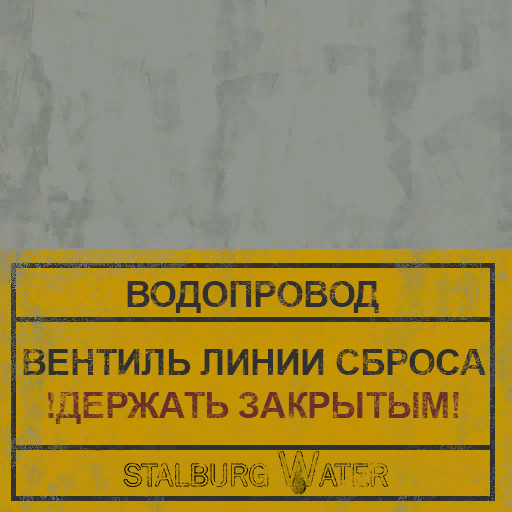
<style>
.page{position:relative;width:512px;height:512px}
.page>*{position:absolute;margin:0}
.t1{font:36px "Arial-BoldMT";letter-spacing:-0.02em;color:#303030}
.t2{font:36px "Arial-BoldMT";letter-spacing:-0.02em;color:#672f2c}
</style>
<div class="page">
<p class="t1" style="left:127px;top:281px;width:252px;height:32px">ВОДОПРОВОД</p>
<p class="t1" style="left:23px;top:349px;width:463px;height:26px">ВЕНТИЛЬ ЛИНИИ СБРОСА</p>
<p class="t2" style="left:48px;top:392px;width:411px;height:32px">!ДЕРЖАТЬ ЗАКРЫТЫМ!</p>
</div>
